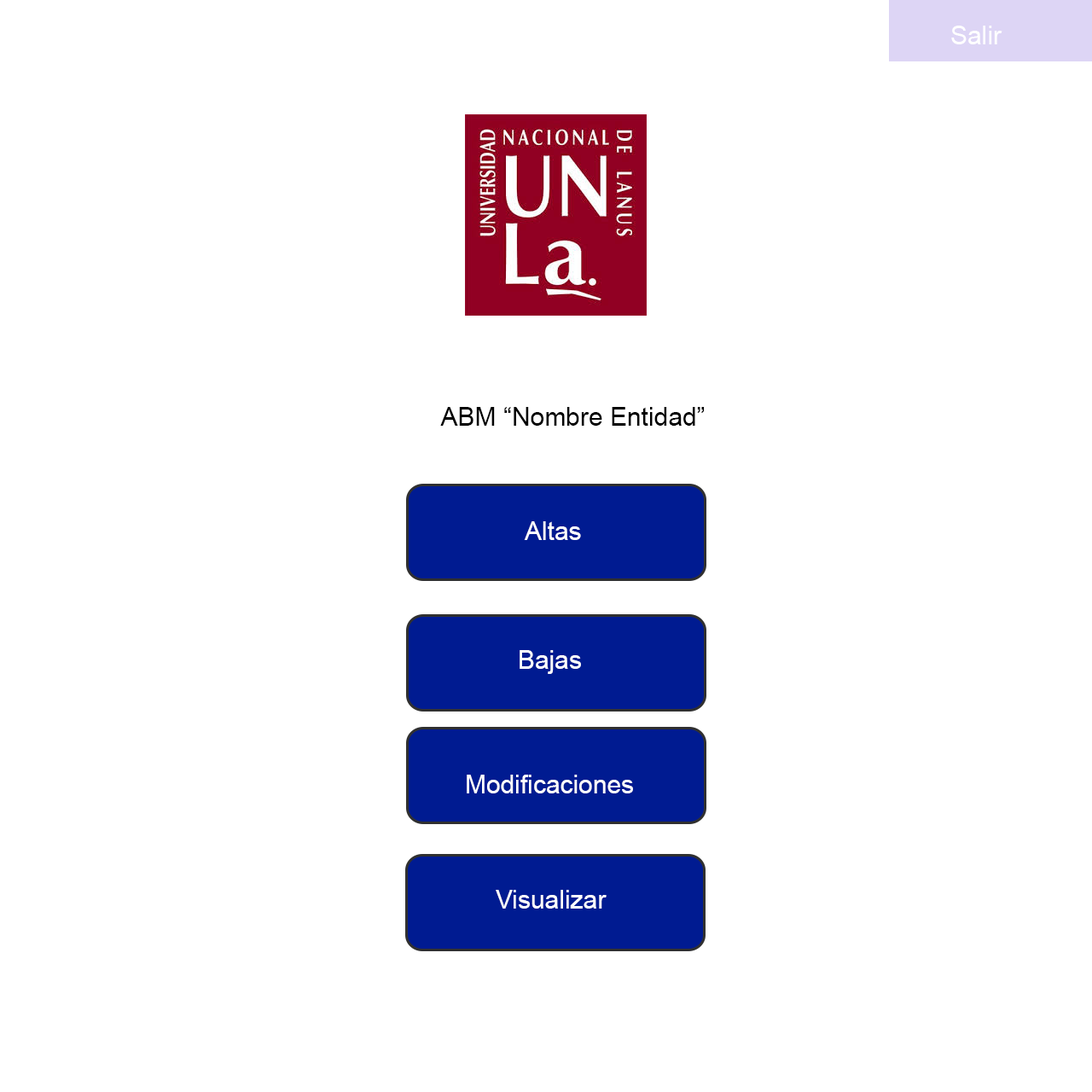
<style>
.page{position:relative;width:1092px;height:1092px;background:#ffffff}
.page>*{position:absolute;margin:0}
.t1{font:25.6px "ArialMT";color:#ffffff}
.t2{font:25.6px "ArialMT";color:#000000}
</style>
<div class="page">
<p class="t1" style="left:951px;top:26px;width:51px;height:18px">Salir</p>
<p class="t2" style="left:440px;top:407px;width:265px;height:19px">ABM “Nombre Entidad”</p>
<p class="t1" style="left:524px;top:521px;width:57px;height:19px">Altas</p>
<p class="t1" style="left:520px;top:650px;width:61px;height:24px">Bajas</p>
<p class="t1" style="left:467px;top:775px;width:166px;height:18px">Modificaciones</p>
<p class="t1" style="left:496px;top:890px;width:111px;height:19px">Visualizar</p>
</div>
